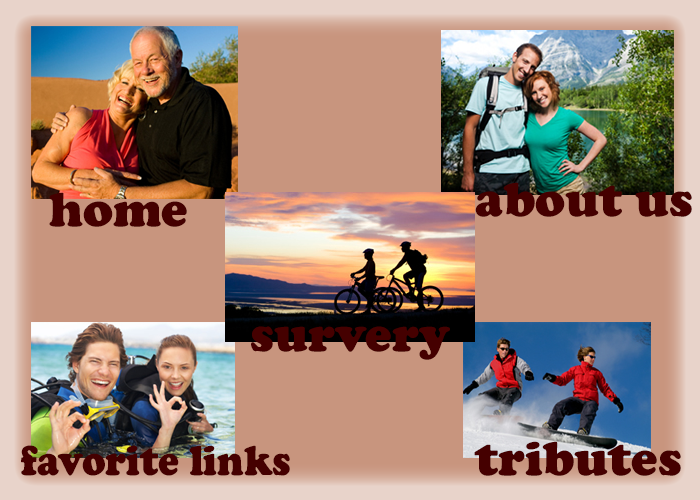
<style>
.page{position:relative;width:700px;height:500px;background:#c8957e}
.page>*{position:absolute;margin:0}
.t1{font:50px "CooperBlack";color:#450000}
.t2{font:43.6px "CooperBlack";color:#450000;scale:0.9 1}
</style>
<div class="page">
<p class="t1" style="left:475px;top:182px;width:217px;height:35px">about us</p>
<p class="t1" style="left:49px;top:192px;width:138px;height:35px">home</p>
<p class="t1" style="left:251px;top:326px;width:199px;height:34px">survery</p>
<p class="t2" style="left:21px;top:445px;width:269px;height:31px">favorite links</p>
<p class="t1" style="left:474px;top:441px;width:207px;height:35px">tributes</p>
</div>
